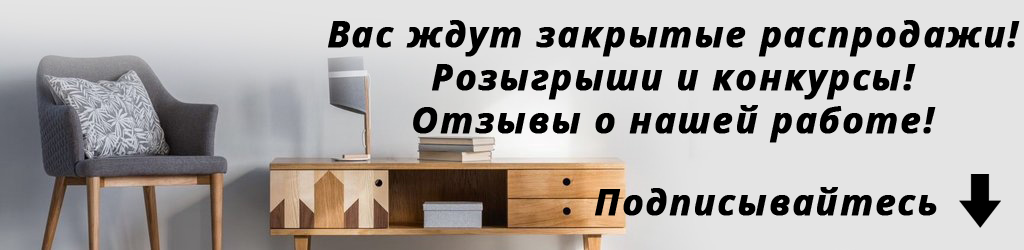
<style>
.page{position:relative;width:1024px;height:250px;background:#e4e4e4}
.page>*{position:absolute;margin:0}
.t1{font:36px "OpenSans-BoldItalic";letter-spacing:0.04em;color:#000000;font-weight:bold}
.t2{font:36px "OpenSans-BoldItalic";letter-spacing:0.04em;color:#010101;font-weight:bold}
</style>
<div class="page">
<p class="t1" style="left:328px;top:20px;width:692px;height:123px;text-align:center">Вас ждут закрытые распродажи!<br>Розыгрыши и конкурсы!<br>Отзывы о нашей работе!</p>
<p class="t2" style="left:595px;top:187px;width:342px;height:29px">Подписывайтесь</p>
</div>
